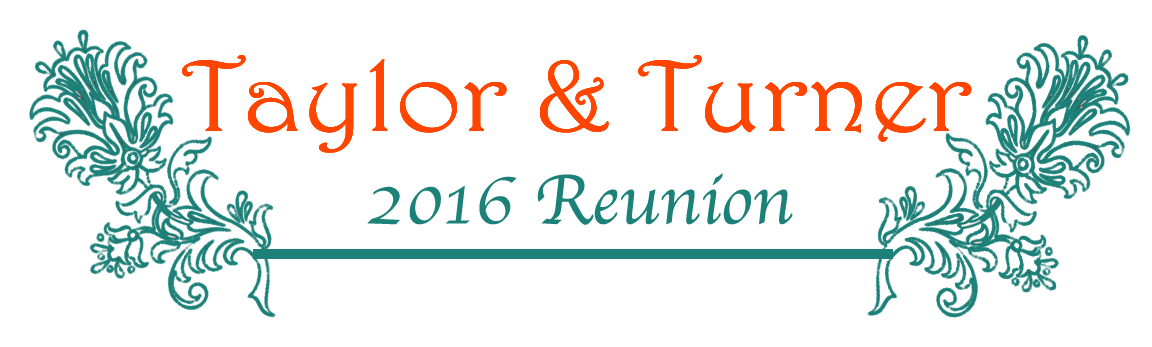
<style>
.page{position:relative;width:1152px;height:347px;background:#ffffff}
.page>*{position:absolute;margin:0}
.t1{font:101px "Harrington";color:#ff4500;scale:1.13 1}
.t2{font:72px "Apple-Chancery";color:#1c8179}
</style>
<div class="page">
<p class="t1" style="left:182px;top:55px;width:790px;height:98px">Taylor &amp; Turner</p>
<p class="t1" style="left:182px;top:55px;width:790px;height:98px">Taylor &amp; Turner</p>
<p class="t1" style="left:182px;top:55px;width:790px;height:98px">Taylor &amp; Turner</p>
<p class="t2" style="left:367px;top:173px;width:426px;height:52px">2016 Reunion</p>
</div>
